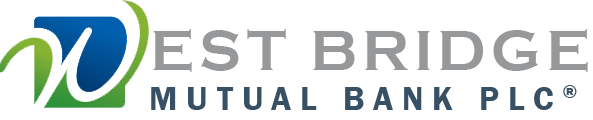
<style>
.page{position:relative;width:593px;height:120px;background:#ffffff}
.page>*{position:absolute;margin:0}
.t1{font:58.3px "CopperplateGothic-Bold";letter-spacing:0.08em;color:#96989a}
.t2{font:33.7px "FranklinGothic-Demi";letter-spacing:0.26em;color:#375064;text-transform:uppercase}
</style>
<div class="page">
<p class="t1" style="left:153px;top:29px;width:435px;height:43px">EST BRIDGE</p>
<p class="t2" style="left:151px;top:85px;width:426px;height:25px">MUTUAL bank PLC®</p>
</div>
